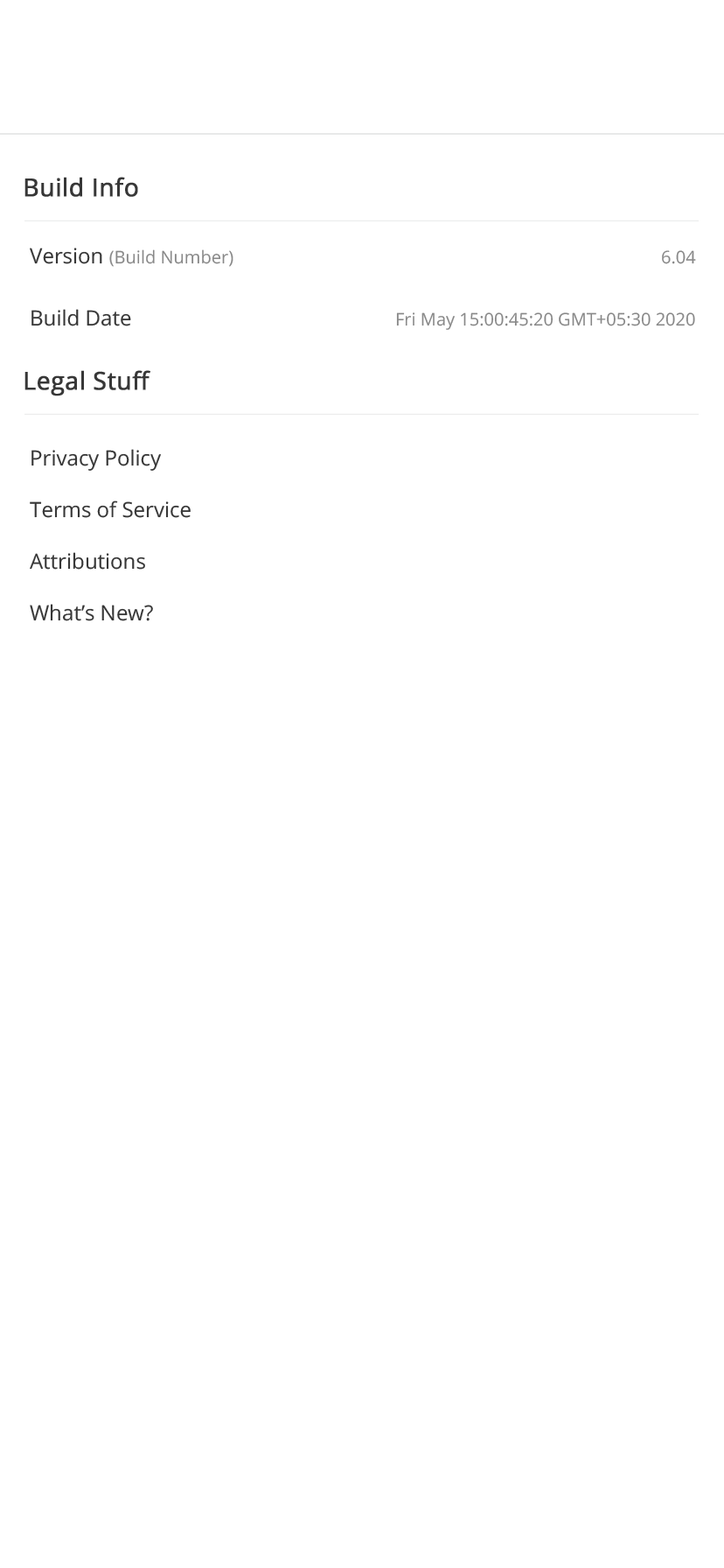
<style>
.page{position:relative;width:724px;height:1568px;background:#ffffff}
.page>*{position:absolute;margin:0}
.t1{font:24.5px "OpenSans";color:#373737;font-weight:bold}
.t2{font:17.5px "OpenSans";color:#888888}
.t3{font:21px "OpenSans";color:#373737}
.t4{font:21px/51.6px "OpenSans";color:#373737}
</style>
<div class="page">
<p class="t1" style="left:24px;top:177px;width:114px;height:20px">Build Info</p>
<p class="t2" style="left:30px;top:248px;width:666px;height:19px"><span class="t3">Version </span>(Build Number)                                                                                              6.04</p>
<p class="t2" style="left:32px;top:309px;width:664px;height:21px"><span class="t3">Build Date</span>                                                          Fri May 15:00:45:20 GMT+05:30 2020</p>
<p class="t1" style="left:24px;top:370px;width:126px;height:26px">Legal Stuff</p>
<p class="t4" style="left:30px;top:449px;width:161px;height:172px">Privacy Policy<br>Terms of Service<br>Attributions<br>What’s New?</p>
</div>
